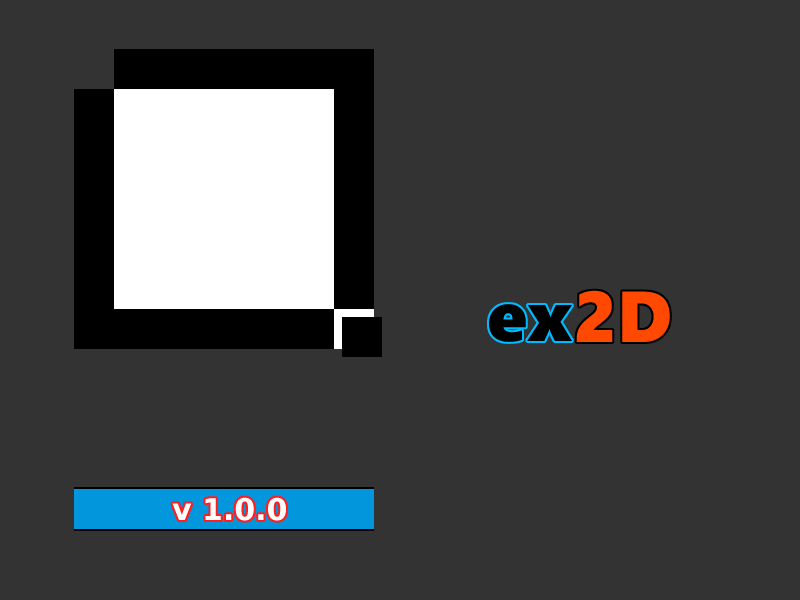
<style>
.page{position:relative;width:800px;height:600px;background:#333333}
.page>*{position:absolute;margin:0}
.t1{font:72px "SegoeWP-Black";color:#ff4800}
.t2{font:72px "SegoeWP-Black";color:#000000}
.t3{font:30px "BitstreamVeraSans-Bold";color:#ffffff}
</style>
<div class="page">
<p class="t1" style="left:576px;top:290px;width:94px;height:52px">2D</p>
<p class="t2" style="left:489px;top:304px;width:83px;height:38px">ex</p>
<p class="t3" style="left:172px;top:497px;width:114px;height:24px">v 1.0.0</p>
</div>
